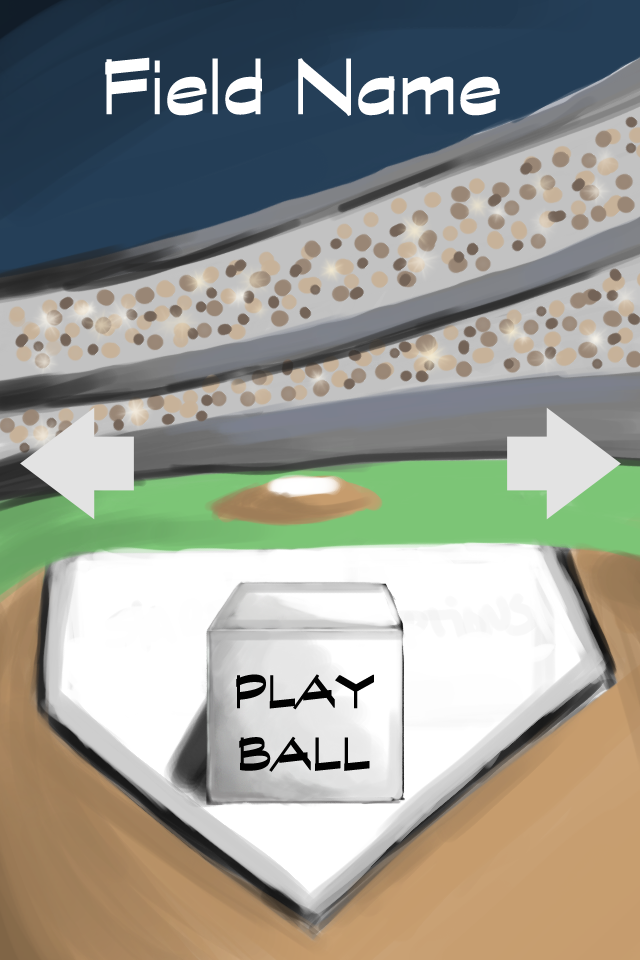
<style>
.page{position:relative;width:640px;height:960px}
.page>*{position:absolute;margin:0}
.t1{font:88px "GraphiteStd-Bold";color:#ffffff}
.t2{font:52px "GraphiteStd-Bold";color:#010101}
</style>
<div class="page">
<p class="t1" style="left:105px;top:57px;width:395px;height:59px">Field Name</p>
<p class="t2" style="left:236px;top:674px;width:138px;height:98px;text-align:center">PLAY<br>BALL</p>
</div>
